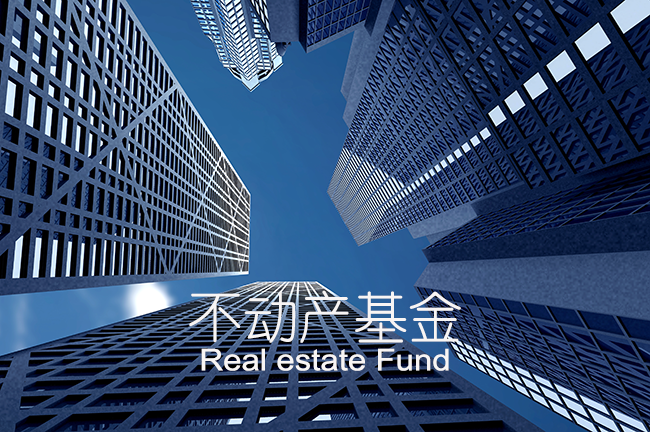
<style>
.page{position:relative;width:650px;height:432px}
.page>*{position:absolute;margin:0}
.t1{font:55px "YouYuan";color:#f8f5f4}
.t2{font:30px "ArialMT";color:#f8f5f4;scale:1.1 1}
</style>
<div class="page">
<p class="t1" style="left:189px;top:290px;width:272px;height:53px">不动产基金</p>
<p class="t2" style="left:201px;top:348px;width:248px;height:23px">Real estate Fund</p>
</div>
